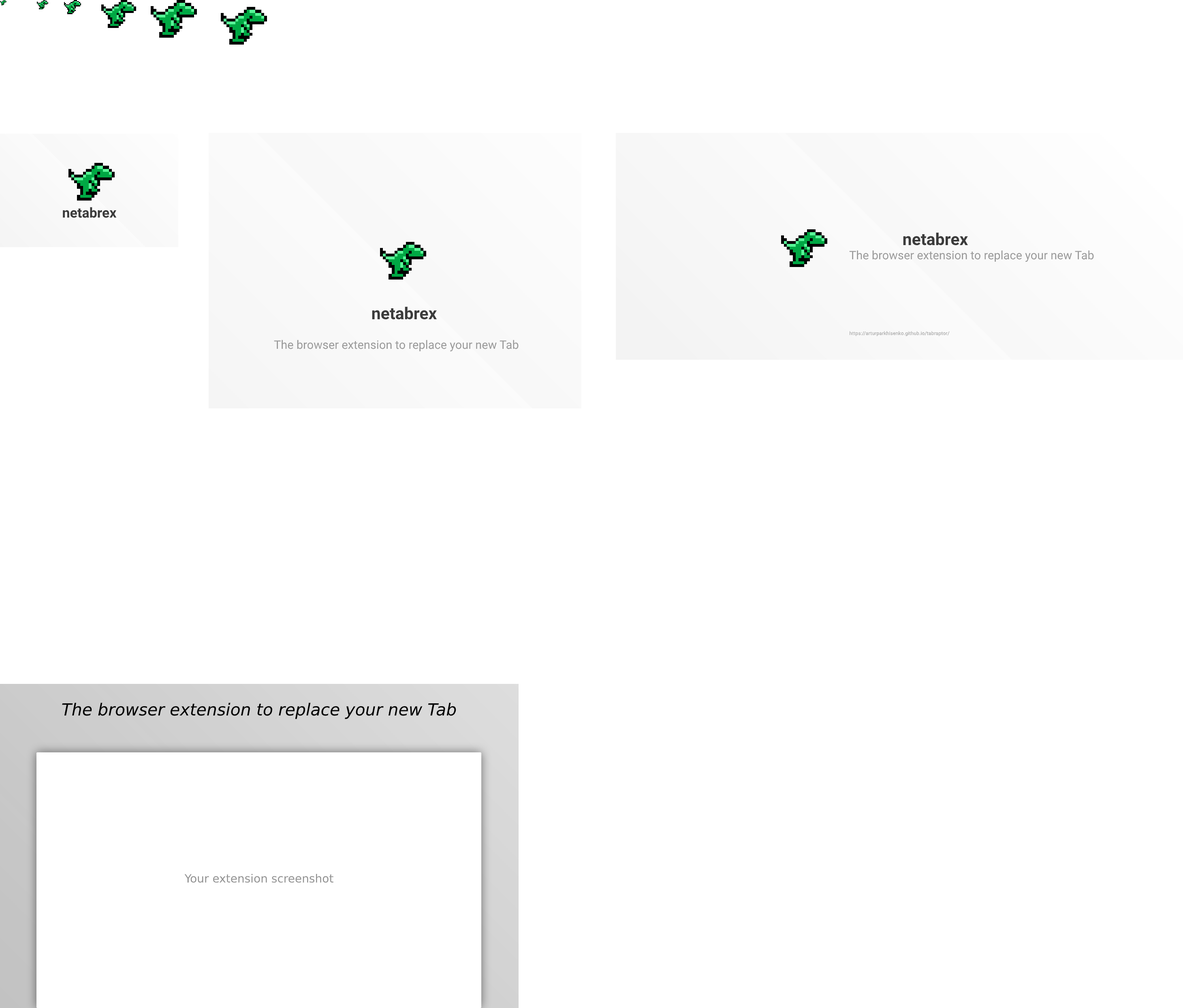
<style>
.page{position:relative;width:1183px;height:1008px;background:#ffffff}
.page>*{position:absolute;margin:0}
.t1{font:13.8px "HelveticaNeue-Bold";color:#3b3b3b}
.t2{font:16.6px "HelveticaNeue-Bold";color:#3b3b3b}
.t3{font:11.7px "HelveticaNeue";color:#999999}
.t4{font:4.9px "HelveticaNeue";letter-spacing:0.018em;color:#969696}
.t5{font:16.6px "Helvetica-Oblique";color:#000000}
.t6{font:11.3px "Helvetica";color:#919191}
</style>
<div class="page">
<p class="t1" style="left:63px;top:207px;width:54px;height:11px">netabrex</p>
<p class="t2" style="left:903px;top:233px;width:65px;height:13px">netabrex</p>
<p class="t3" style="left:849px;top:250px;width:245px;height:12px">The browser extension to replace your new Tab</p>
<p class="t2" style="left:372px;top:307px;width:65px;height:13px">netabrex</p>
<p class="t3" style="left:274px;top:340px;width:245px;height:12px">The browser extension to replace your new Tab</p>
<p class="t4" style="left:850px;top:331px;width:100px;height:5px">https://arturparkhisenko.github.io/tabraptor/</p>
<p class="t5" style="left:62px;top:703px;width:394px;height:16px">The browser extension to replace your new Tab</p>
<p class="t6" style="left:184px;top:873px;width:149px;height:10px">Your extension screenshot</p>
</div>
